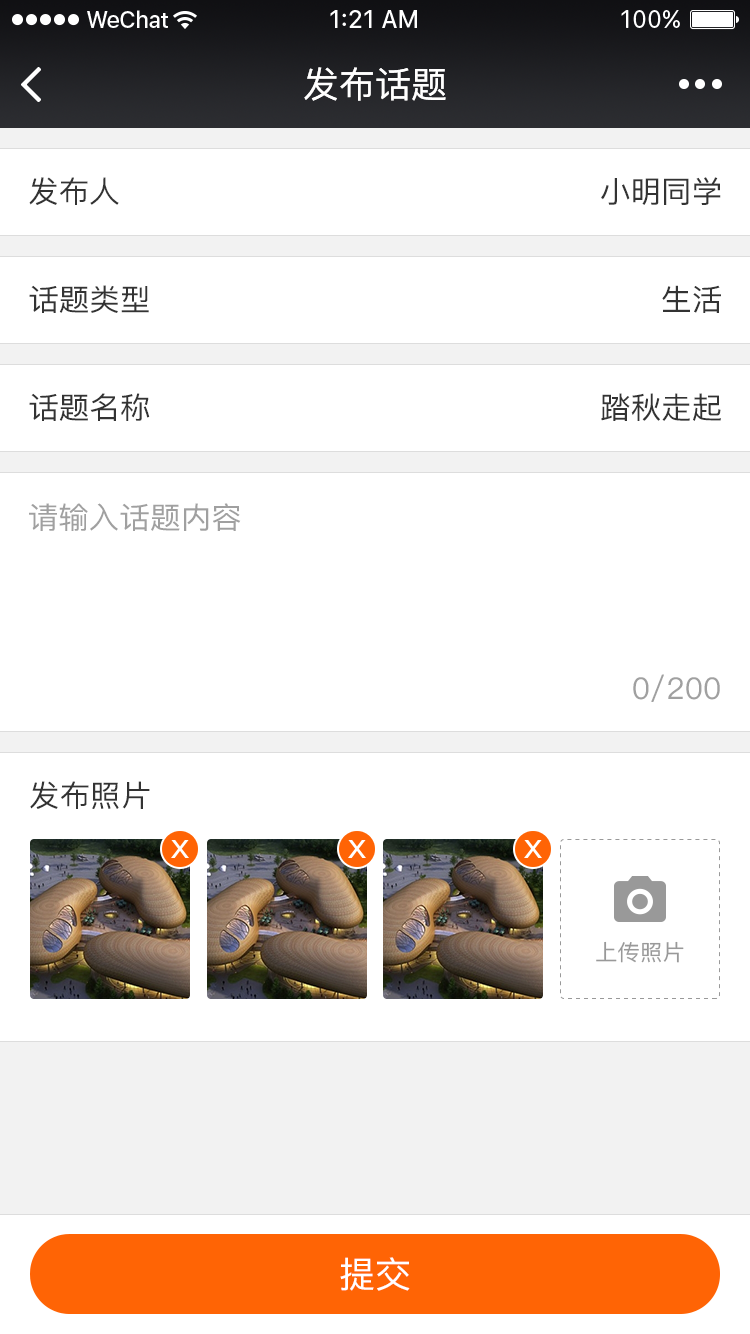
<style>
.page{position:relative;width:750px;height:1334px;background:#ffffff}
.page>*{position:absolute;margin:0}
.t1{font:36px "PingFang-SC-Medium";color:#ffffff}
.t2{font:30px "PingFang-SC-Medium";color:#333333}
.t3{font:30px "PingFang-SC-Medium";color:#a0a0a0}
.t4{font:29.9px "PingFang-SC-Medium";color:#333333}
.t5{font:22px "PingFang-SC-Medium";color:#999999}
</style>
<div class="page">
<p class="t1" style="left:304px;top:67px;width:142px;height:34px">发布话题</p>
<p class="t2" style="left:29px;top:177px;width:90px;height:28px">发布人</p>
<p class="t2" style="left:601px;top:177px;width:120px;height:28px">小明同学</p>
<p class="t2" style="left:29px;top:285px;width:120px;height:28px">话题类型</p>
<p class="t2" style="left:662px;top:285px;width:59px;height:28px">生活</p>
<p class="t2" style="left:29px;top:393px;width:121px;height:28px">话题名称</p>
<p class="t2" style="left:601px;top:393px;width:120px;height:28px">踏秋走起</p>
<p class="t3" style="left:29px;top:503px;width:212px;height:28px">请输入话题内容</p>
<p class="t3" style="left:633px;top:674px;width:87px;height:28px">0/200</p>
<p class="t4" style="left:30px;top:781px;width:120px;height:28px">发布照片</p>
<p class="t5" style="left:596px;top:941px;width:88px;height:22px">上传照片</p>
<p class="t1" style="left:340px;top:1257px;width:70px;height:34px">提交</p>
</div>
